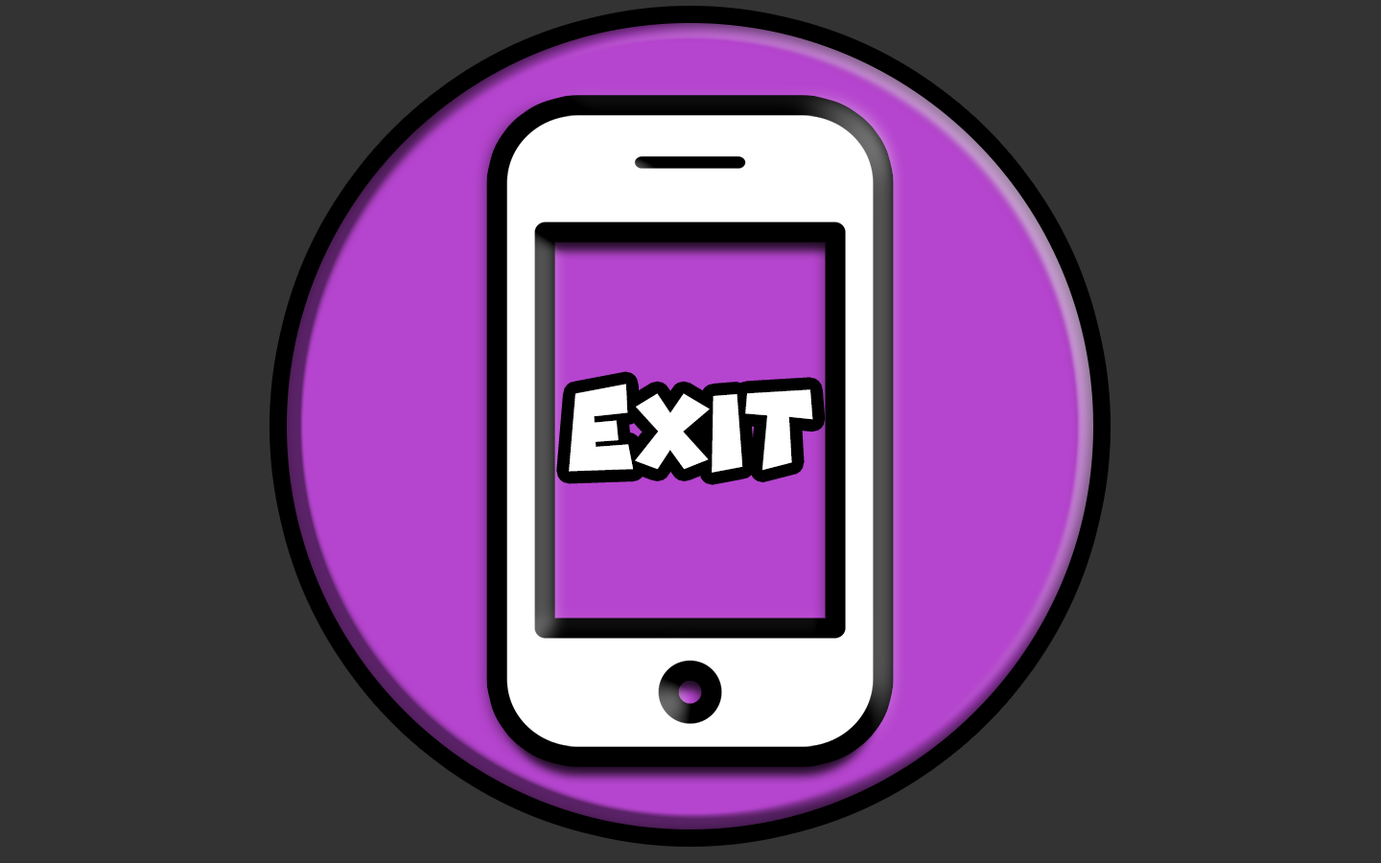
<style>
.page{position:relative;width:1381px;height:863px;background:#333333}
.page>*{position:absolute;margin:0}
.t1{font:109.7px "Funhouse";color:#ffffff}
</style>
<div class="page">
<p class="t1" style="left:569px;top:384px;width:244px;height:89px">EXIT</p>
</div>
